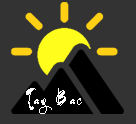
<style>
.page{position:relative;width:136px;height:124px;background:#333333}
.page>*{position:absolute;margin:0}
.t1{font:15.2px/40px "UTM-ThuPhap-Thien-An";letter-spacing:0.235em;color:#fcfcfc;scale:0.76 1}
</style>
<div class="page">
<p class="t1" style="left:26px;top:88px;width:56px;height:26px;text-align:center">Tay Bac</p>
</div>
